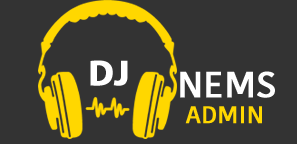
<style>
.page{position:relative;width:297px;height:144px;background:#333333}
.page>*{position:absolute;margin:0}
.t1{font:36px "MyriadPro-Bold";color:#ffffff;font-weight:bold}
.t2{font:36px "KohinoorDevanagari-Medium";color:#ffffff;font-weight:bold}
.t3{font:24px "KohinoorDevanagari-Medium";color:#ffd700;font-weight:bold}
</style>
<div class="page">
<p class="t1" style="left:90px;top:60px;width:38px;height:26px">DJ</p>
<p class="t2" style="left:180px;top:71px;width:95px;height:27px">NEMS</p>
<p class="t3" style="left:185px;top:106px;width:77px;height:18px">ADMIN</p>
</div>
